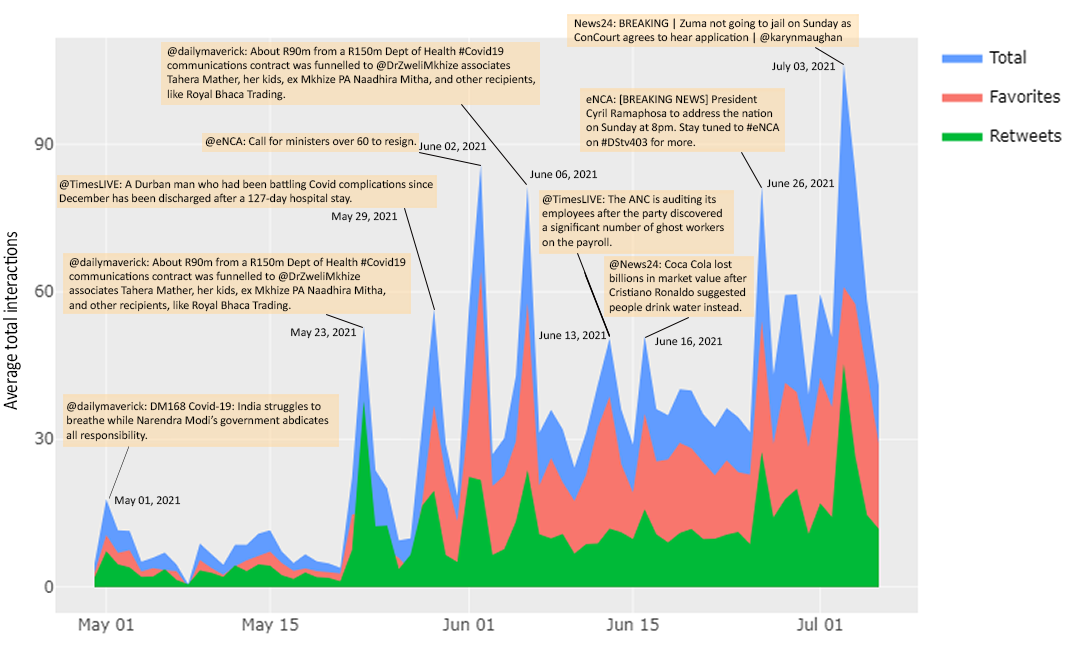
<style>
.page{position:relative;width:1080px;height:667px;background:#ebebeb}
.page>*{position:absolute;margin:0}
.t1{font:11.9px "Calibri";color:#000000}
.t2{font:12px "Calibri";color:#000000}
.t3{font:20.8px "Calibri";color:#000000;scale:0.83 1}
</style>
<div class="page">
<p class="t1" style="left:574px;top:18px;width:277px;height:26px">News24: BREAKING | Zuma not going to jail on Sunday as <br>ConCourt agrees to hear application | @karynmaughan</p>
<p class="t1" style="left:167px;top:46px;width:369px;height:55px">@dailymaverick: About R90m from a R150m Dept of Health #Covid19 <br>communications contract was funnelled to @DrZweliMkhize associates <br>Tahera Mather, her kids, ex Mkhize PA Naadhira Mitha, and other recipients, <br>like Royal Bhaca Trading.</p>
<p class="t2" style="left:772px;top:61px;width:64px;height:12px">July 03, 2021</p>
<p class="t1" style="left:586px;top:94px;width:194px;height:53px">eNCA: [BREAKING NEWS] President <br>Cyril Ramaphosa to address the nation <br>on Sunday at 8pm. Stay tuned to #eNCA<br>on #DStv403 for more.</p>
<p class="t1" style="left:205px;top:136px;width:212px;height:12px">@eNCA: Call for ministers over 60 to resign.</p>
<p class="t2" style="left:419px;top:142px;width:68px;height:10px">June 02, 2021</p>
<p class="t2" style="left:530px;top:170px;width:68px;height:10px">June 06, 2021</p>
<p class="t1" style="left:59px;top:179px;width:374px;height:26px">@TimesLIVE: A Durban man who had been battling Covid complications since <br>December has been discharged after a 127-day hospital stay.</p>
<p class="t2" style="left:767px;top:179px;width:68px;height:10px">June 26, 2021</p>
<p class="t1" style="left:542px;top:194px;width:182px;height:55px">@TimesLIVE: The ANC is auditing its <br>employees after the party discovered <br>a significant number of ghost workers <br>on the payroll.</p>
<p class="t2" style="left:332px;top:212px;width:66px;height:11px">May 29, 2021</p>
<p class="t3" style="left:3px;top:231px;width:18px;height:179px;rotate:-90deg">Average total interactions</p>
<p class="t1" style="left:69px;top:257px;width:337px;height:55px">@dailymaverick: About R90m from a R150m Dept of Health #Covid19 <br>communications contract was funnelled to @DrZweliMkhize <br>associates Tahera Mather, her kids, ex Mkhize PA Naadhira Mitha, <br>and other recipients, like Royal Bhaca Trading.</p>
<p class="t1" style="left:609px;top:259px;width:138px;height:55px">@News24: Coca Cola lost <br>billions in market value after <br>Cristiano Ronaldo suggested <br>people drink water instead.</p>
<p class="t2" style="left:291px;top:328px;width:66px;height:11px">May 23, 2021</p>
<p class="t2" style="left:539px;top:331px;width:68px;height:10px">June 13, 2021</p>
<p class="t2" style="left:655px;top:337px;width:68px;height:10px">June 16, 2021</p>
<p class="t2" style="left:66px;top:401px;width:263px;height:41px">@dailymaverick: DM168 Covid-19: India struggles to <br>breathe while Narendra Modi’s government abdicates <br>all responsibility.</p>
<p class="t2" style="left:115px;top:496px;width:66px;height:11px">May 01, 2021</p>
</div>
